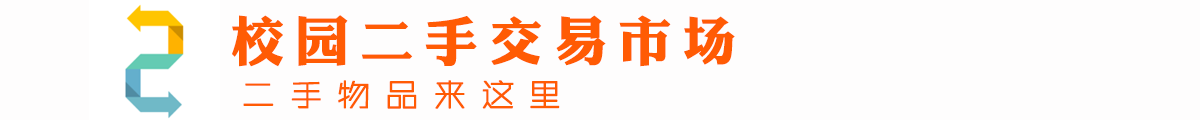
<style>
.page{position:relative;width:1200px;height:120px;background:#fefdfd}
.page>*{position:absolute;margin:0}
.t1{font:53.3px "DFLiJinHeiW8";letter-spacing:0.21em;color:#ff5b04}
.t2{font:33.3px "ZHSRXT--GBK1-0";letter-spacing:0.41em;color:#ff5b04;font-weight:bold}
</style>
<div class="page">
<p class="t1" style="left:232px;top:15px;width:503px;height:52px">校园二手交易市场</p>
<p class="t2" style="left:243px;top:80px;width:317px;height:29px">二手物品来这里</p>
</div>
